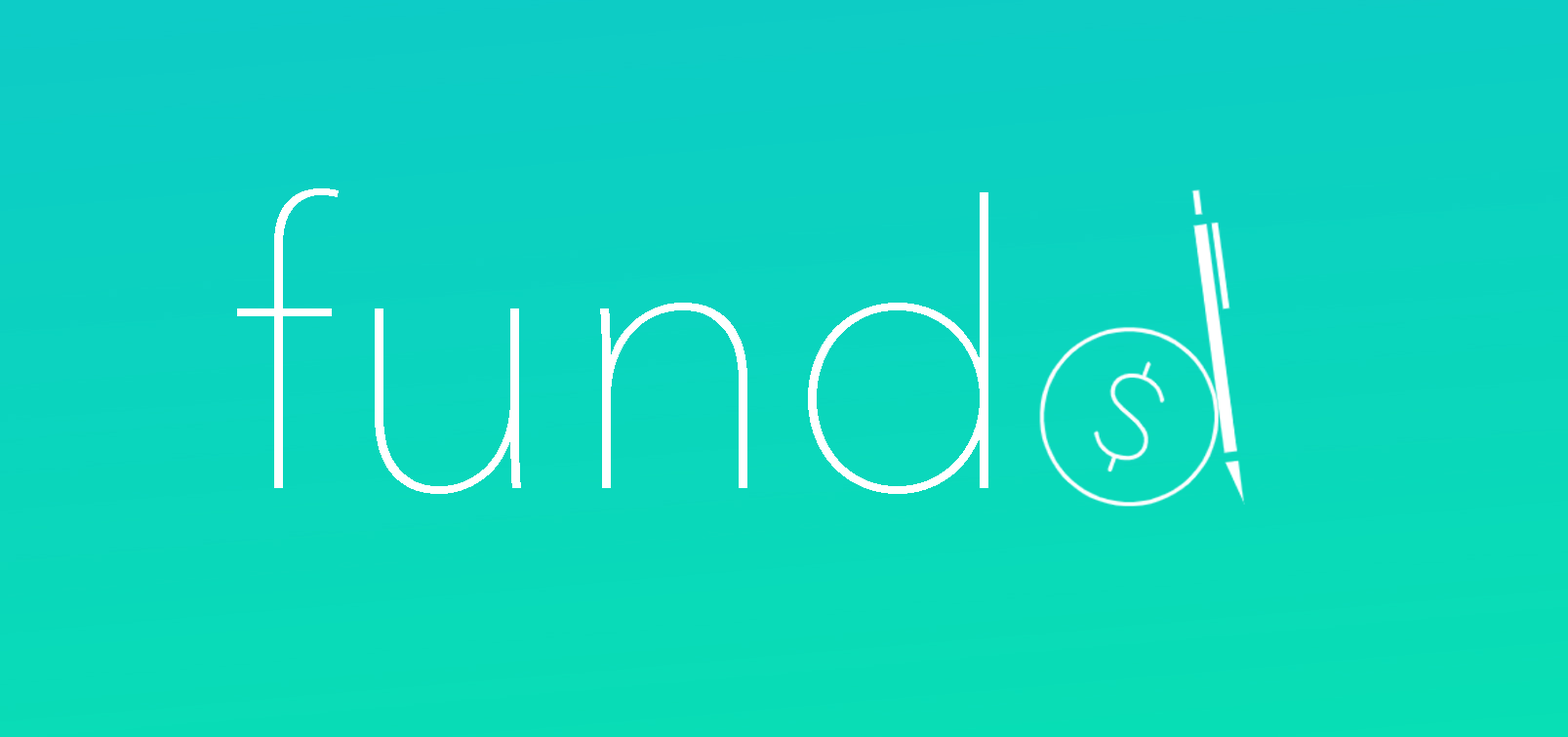
<style>
.page{position:relative;width:1568px;height:737px}
.page>*{position:absolute;margin:0}
.t1{font:390.3px "AvenirNext-UltraLight";color:#ffffff}
</style>
<div class="page">
<p class="t1" style="left:237px;top:188px;width:751px;height:306px">fund</p>
</div>
